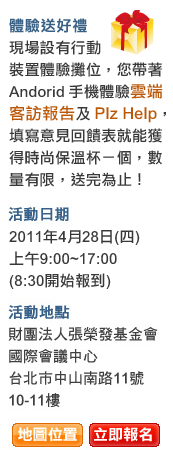
<style>
.page{position:relative;width:173px;height:450px;background:#ffffff}
.page>*{position:absolute;margin:0}
.t1{font:15px "DFLiHei-Md-HK-BF";letter-spacing:0.055em;color:#396185}
.t2{font:15px/22px "DFLiHei-Md-HK-BF";letter-spacing:0.025em;color:#383838}
.t3{font:16.2px/22px "DFLiHei-Md-HK-BF";letter-spacing:0.025em;color:#bb5808}
</style>
<div class="page">
<p class="t1" style="left:9px;top:18px;width:78px;height:15px">體驗送好禮</p>
<p class="t2" style="left:9px;top:40px;width:157px;height:147px">現場設有行動<br>裝置體驗攤位，您帶著<br>Andorid手機體驗<span class="t3">雲端<br>客訪報告</span>及<span class="t3">Plz Help</span>，<br>填寫意見回饋表就能獲<br>得時尚保溫杯ㄧ個，數<br>量有限，送完為止！</p>
<p class="t2" style="left:9px;top:229px;width:131px;height:60px">2011年4月28日(四)<br>上午9:00~17:00<br>(8:30開始報到)</p>
</div>
